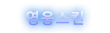
<style>
.page{position:relative;width:110px;height:33px;background:#ffffff}
.page>*{position:absolute;margin:0}
.t1{font:15px "MalgunGothicBold"}
</style>
<div class="page">
<p class="t1" style="left:26px;top:11px;width:57px;height:15px">영웅스킨</p>
</div>
